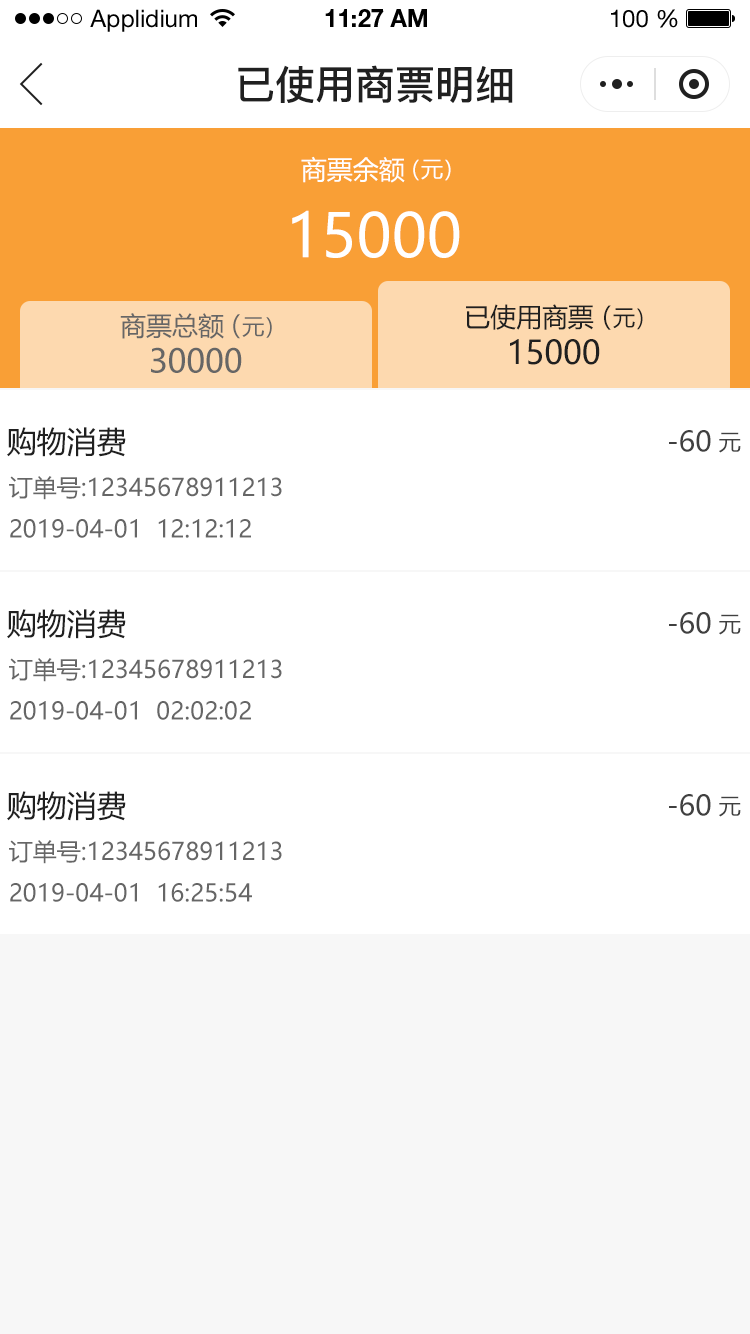
<style>
.page{position:relative;width:750px;height:1334px;background:#ffffff}
.page>*{position:absolute;margin:0}
.t1{font:24px "HelveticaNeueLTStd-Roman";color:#000000}
.t2{font:24px "HelveticaNeueLTStd-Bd";color:#000000}
.t3{font:40px "PingFang-SC-Bold";color:#202020;text-transform:uppercase}
.t4{font:26px "MicrosoftYaHei";color:#ffffff;text-transform:uppercase}
.t5{font:22px "MicrosoftYaHei";color:#ffffff;text-transform:uppercase}
.t6{font:60px "MicrosoftYaHei";color:#ffffff;text-transform:uppercase}
.t7{font:26.2px "MicrosoftYaHei";color:#202020;text-transform:uppercase}
.t8{font:22.2px "MicrosoftYaHei";color:#202020;text-transform:uppercase}
.t9{font:26px "MicrosoftYaHei";color:#666666;text-transform:uppercase}
.t10{font:22px "MicrosoftYaHei";color:#666666;text-transform:uppercase}
.t11{font:32.2px "MicrosoftYaHei";color:#202020;text-transform:uppercase}
.t12{font:32px "MicrosoftYaHei";color:#666666;text-transform:uppercase}
.t13{font:30px "MicrosoftYaHei";color:#202020;text-transform:uppercase}
.t14{font:28px "MicrosoftYaHei";color:#404040;text-transform:uppercase}
.t15{font:22px "MicrosoftYaHei";color:#404040;text-transform:uppercase}
.t16{font:24px "MicrosoftYaHei";color:#666666;text-transform:uppercase}
</style>
<div class="page">
<p class="t1" style="left:90px;top:9px;width:107px;height:23px">Applidium</p>
<p class="t2" style="left:325px;top:9px;width:102px;height:18px">11:27 AM</p>
<p class="t1" style="left:611px;top:9px;width:67px;height:19px">100 %</p>
<p class="t3" style="left:238px;top:65px;width:275px;height:38px">已使用商票明细</p>
<p class="t4" style="left:301px;top:156px;width:104px;height:27px">商票余额</p>
<p class="t5" style="left:413px;top:159px;width:38px;height:22px">（元）</p>
<p class="t6" style="left:292px;top:210px;width:168px;height:48px">15000</p>
<p class="t7" style="left:466px;top:304px;width:128px;height:26px">已使用商票</p>
<p class="t8" style="left:604px;top:305px;width:39px;height:25px"><span class="t7">（</span>元）</p>
<p class="t9" style="left:120px;top:313px;width:104px;height:26px">商票总额</p>
<p class="t10" style="left:233px;top:314px;width:39px;height:25px"><span class="t9">（</span>元）</p>
<p class="t11" style="left:510px;top:339px;width:90px;height:26px">15000</p>
<p class="t12" style="left:151px;top:347px;width:91px;height:26px">30000</p>
<p class="t13" style="left:7px;top:427px;width:119px;height:30px">购物消费</p>
<p class="t14" style="left:669px;top:430px;width:42px;height:22px">-60</p>
<p class="t15" style="left:719px;top:432px;width:22px;height:21px">元</p>
<p class="t16" style="left:9px;top:476px;width:273px;height:24px">订单号:12345678911213</p>
<p class="t16" style="left:10px;top:519px;width:241px;height:19px">2019-04-01  12:12:12</p>
<p class="t13" style="left:7px;top:609px;width:119px;height:30px">购物消费</p>
<p class="t14" style="left:669px;top:612px;width:42px;height:22px">-60</p>
<p class="t15" style="left:719px;top:614px;width:22px;height:21px">元</p>
<p class="t16" style="left:9px;top:658px;width:273px;height:24px">订单号:12345678911213</p>
<p class="t16" style="left:10px;top:701px;width:241px;height:19px">2019-04-01  02:02:02</p>
<p class="t13" style="left:7px;top:791px;width:119px;height:30px">购物消费</p>
<p class="t14" style="left:669px;top:794px;width:42px;height:22px">-60</p>
<p class="t15" style="left:719px;top:796px;width:22px;height:21px">元</p>
<p class="t16" style="left:9px;top:840px;width:273px;height:24px">订单号:12345678911213</p>
<p class="t16" style="left:10px;top:883px;width:242px;height:19px">2019-04-01  16:25:54</p>
</div>
